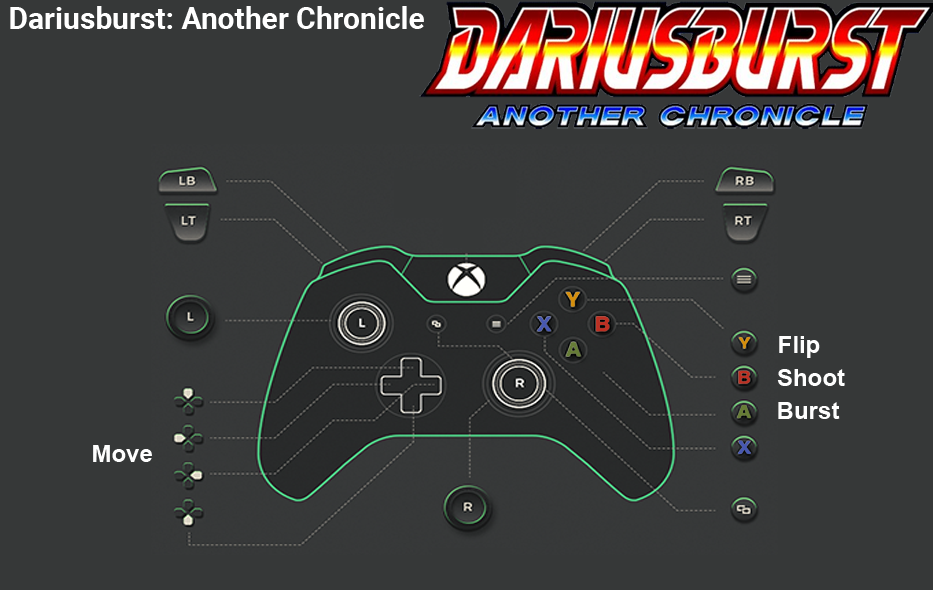
<style>
.page{position:relative;width:933px;height:590px;background:#363838}
.page>*{position:absolute;margin:0}
.t1{font:30px "Roboto-Bold";color:#ffffff}
.t2{font:24px "Arial-BoldMT";color:#fefefe}
</style>
<div class="page">
<p class="t1" style="left:10px;top:6px;width:414px;height:23px">Dariusburst: Another Chronicle</p>
<p class="t2" style="left:779px;top:336px;width:41px;height:22px">Flip</p>
<p class="t2" style="left:777px;top:369px;width:68px;height:17px">Shoot</p>
<p class="t2" style="left:778px;top:402px;width:62px;height:17px">Burst</p>
<p class="t2" style="left:93px;top:445px;width:59px;height:17px">Move</p>
</div>
